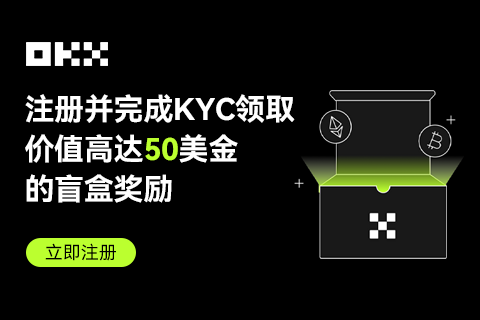
<style>
.page{position:relative;width:480px;height:320px;background:#000000}
.page>*{position:absolute;margin:0}
.t1{font:30px/40px "HarmonyOS_Sans_SC_Bold";letter-spacing:-0.01em;color:#ffffff}
.t2{font:30px/40px "HarmonyOS_Sans_SC_Bold";letter-spacing:-0.01em;color:#bcff2f}
.t3{font:18px "HarmonyOS_Sans_SC";color:#000000}
</style>
<div class="page">
<p class="t1" style="left:25px;top:94px;width:270px;height:109px">注册并完成KYC领取<br>价值高达<span class="t2">50</span>美金<br>的盲盒奖励</p>
<p class="t3" style="left:45px;top:243px;width:71px;height:18px">立即注册</p>
</div>
